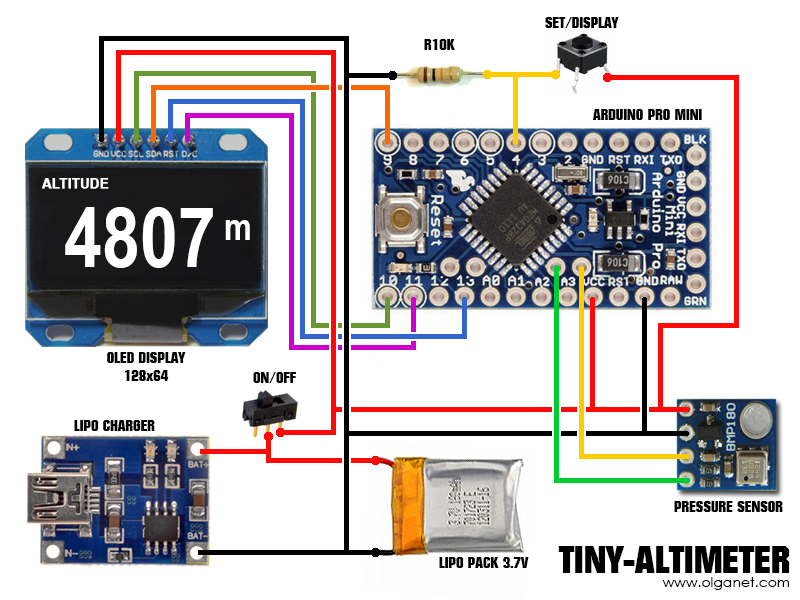
<style>
.page{position:relative;width:800px;height:600px;background:#ffffff}
.page>*{position:absolute;margin:0}
.t1{font:15px "Autumn";color:#000000}
.t2{font:13px "Arial-BoldMT";color:#ffffff;font-weight:bold}
.t3{font:83.3px "ArialNarrow-Bold";color:#ffffff}
.t4{font:38px "ArialNarrow-Bold";color:#ffffff}
.t5{font:15px/17.6px "Autumn";color:#000000}
.t6{font:15.1px "Autumn";color:#000000}
.t7{font:14px/14px "CenturyGothic";color:#000000}
.t8{font:38px/27.6px "Autumn";color:#000000}
</style>
<div class="page">
<p class="t1" style="left:545px;top:17px;width:74px;height:11px">SET/DISPLAY</p>
<p class="t1" style="left:424px;top:39px;width:31px;height:11px">R10K</p>
<p class="t1" style="left:593px;top:109px;width:109px;height:11px">ARDUINO PRO MINI</p>
<p class="t2" style="left:42px;top:178px;width:67px;height:11px">ALTITUDE</p>
<p class="t3" style="left:65px;top:207px;width:148px;height:61px">4807</p>
<p class="t4" style="left:225px;top:220px;width:25px;height:20px">m</p>
<p class="t5" style="left:107px;top:352px;width:79px;height:29px;text-align:center">OLED DISPLAY<br>128x64</p>
<p class="t1" style="left:253px;top:372px;width:43px;height:11px">ON/OFF</p>
<p class="t1" style="left:74px;top:420px;width:81px;height:11px">LIPO CHARGER</p>
<p class="t6" style="left:674px;top:501px;width:109px;height:11px">PRESSURE SENSOR</p>
<p class="t1" style="left:439px;top:557px;width:90px;height:11px">LIPO PACK 3.7V</p>
<p class="t7" style="left:558px;top:546px;width:232px;height:44px;text-align:right"><span class="t8">TINY-ALTIMETER<br></span>www.olganet.com</p>
</div>
